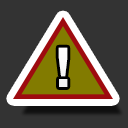
<style>
.page{position:relative;width:128px;height:128px;background:#333333}
.page>*{position:absolute;margin:0}
.t1{font:54.2px "Helvetica-Bold";color:#ffffff}
</style>
<div class="page">
<p class="t1" style="left:58px;top:47px;width:10px;height:40px">!</p>
</div>
